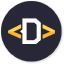
<style>
.page{position:relative;width:64px;height:64px;background:#272737}
.page>*{position:absolute;margin:0}
.t1{font:34.7px "Haymaker";color:#ffffff}
</style>
<div class="page">
<p class="t1" style="left:20px;top:18px;width:21px;height:26px">D</p>
</div>
